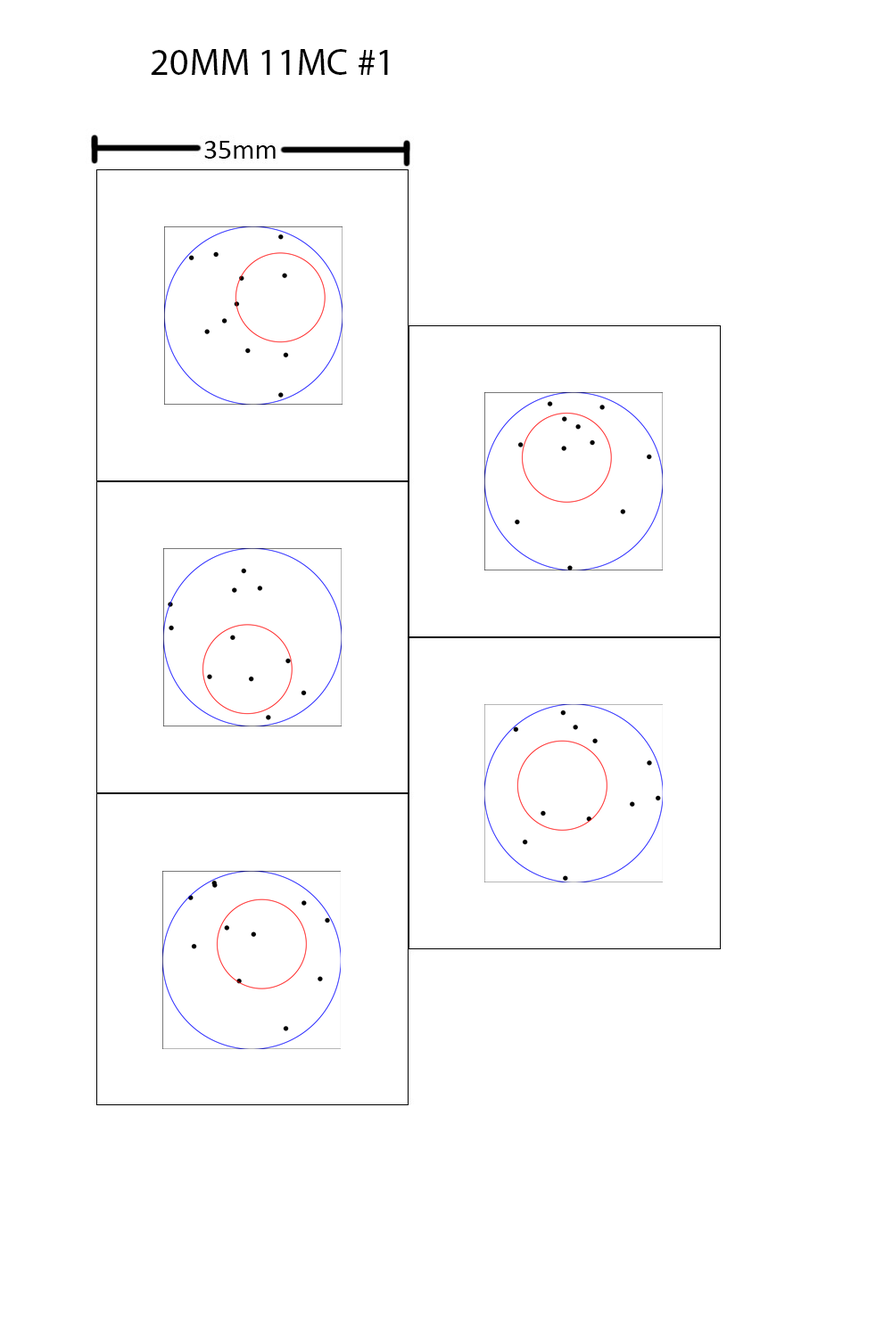
<style>
.page{position:relative;width:892px;height:1337px;background:#ffffff}
.page>*{position:absolute;margin:0}
.t1{font:37.7px "MyriadPro-Regular";color:#000000}
</style>
<div class="page">
<p class="t1" style="left:151px;top:49px;width:237px;height:26px">20MM 11MC #1</p>
</div>
